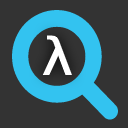
<style>
.page{position:relative;width:128px;height:128px;background:#333333}
.page>*{position:absolute;margin:0}
.t1{font:52px "DejaVuSans";color:#ffffff;font-weight:bold}
</style>
<div class="page">
<p class="t1" style="left:42px;top:35px;width:30px;height:40px">λ</p>
</div>
